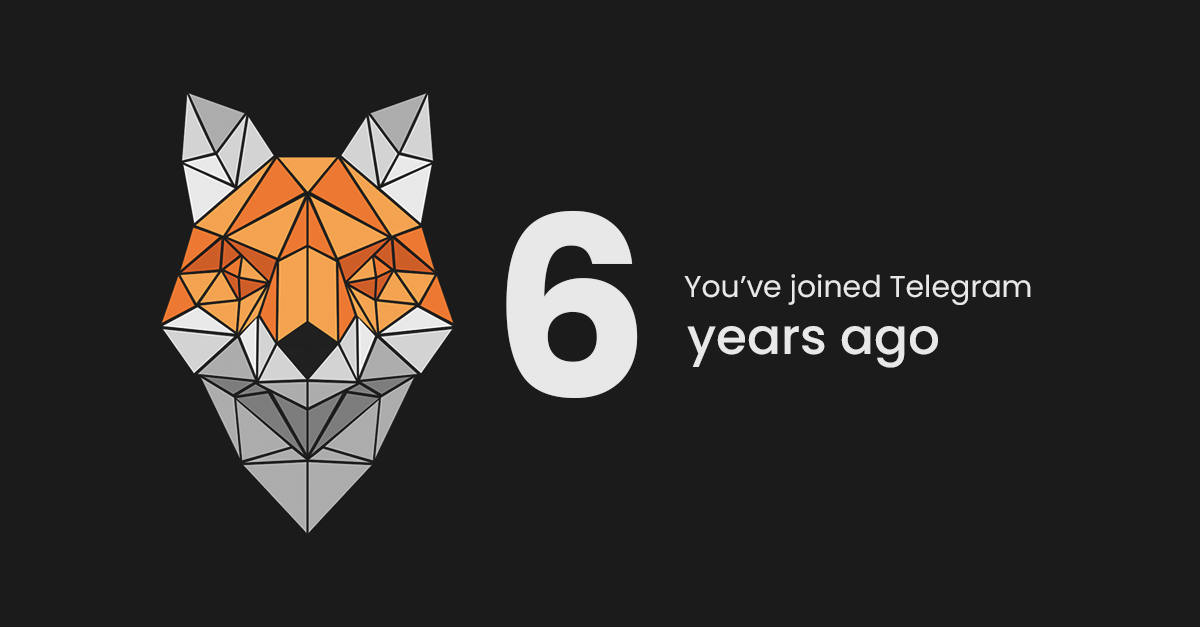
<style>
.page{position:relative;width:1200px;height:627px;background:#1b1b1b}
.page>*{position:absolute;margin:0}
.t1{font:249.7px "Poppins-Bold";color:#e9e8e9}
.t2{font:30px "Poppins-Regular";color:#e9e8e9}
.t3{font:49.9px "Poppins-Medium";color:#e9e8e9}
</style>
<div class="page">
<p class="t1" style="left:506px;top:210px;width:132px;height:188px">6</p>
<p class="t2" style="left:684px;top:274px;width:347px;height:31px">You’ve joined Telegram</p>
<p class="t3" style="left:687px;top:326px;width:251px;height:42px">years ago</p>
</div>
